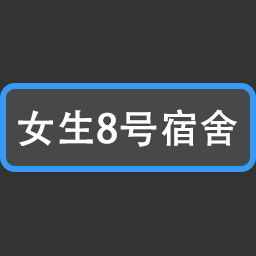
<style>
.page{position:relative;width:256px;height:256px;background:#333333}
.page>*{position:absolute;margin:0}
.t1{font:39px "AdobeHeitiStd-Regular";color:#ffffff;font-weight:bold}
</style>
<div class="page">
<p class="t1" style="left:18px;top:109px;width:219px;height:38px">女生8号宿舍</p>
</div>
